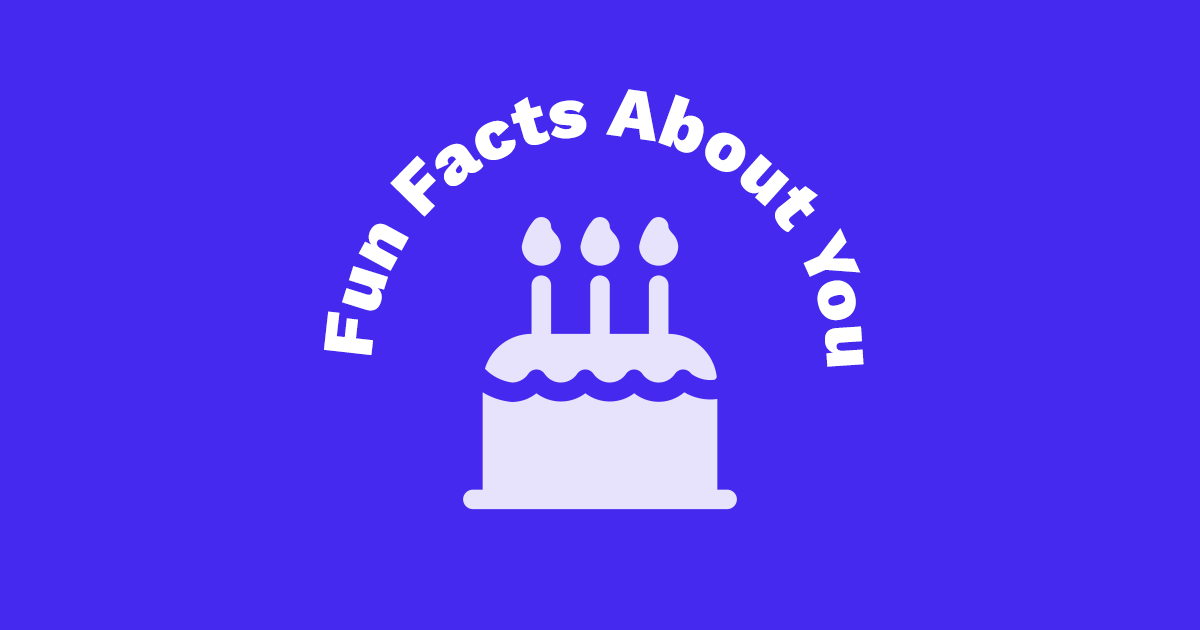
<style>
.page{position:relative;width:1200px;height:630px;background:#4629ee}
.page>*{position:absolute;margin:0}
.t1{font:72px "WorkSans-ExtraBold";letter-spacing:-0.01em;color:#ffffff}
</style>
<div class="page">
<p class="t1" style="left:324px;top:89px;width:540px;height:278px;rotate:1deg">Fun Facts About You</p>
</div>
